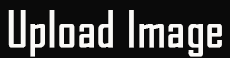
<style>
.page{position:relative;width:230px;height:58px;background:#0a0a0a}
.page>*{position:absolute;margin:0}
.t1{font:48px "AgencyFB-Reg";color:#faf9f7;font-weight:bold}
</style>
<div class="page">
<p class="t1" style="left:8px;top:10px;width:214px;height:47px">Upload Image</p>
</div>
